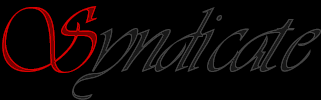
<style>
.page{position:relative;width:321px;height:100px;background:#000000}
.page>*{position:absolute;margin:0}
.t1{font:89.1px "Astrania";scale:0.91 1}
</style>
<div class="page">
<p class="t1" style="left:2px;top:6px;width:95px;height:67px">S</p>
<p class="t1" style="left:72px;top:7px;width:249px;height:93px">yndicate</p>
</div>
